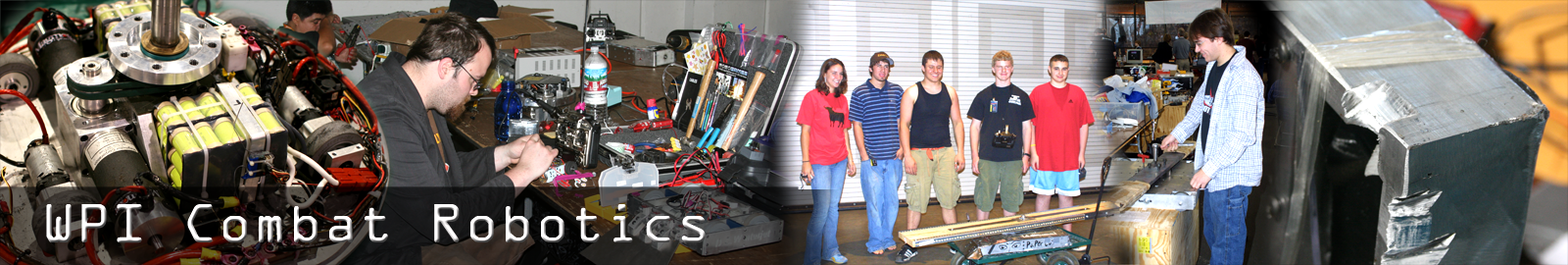
<style>
.page{position:relative;width:1568px;height:265px}
.page>*{position:absolute;margin:0}
.t1{font:49px "OCRAStd";color:#f9f6f6}
</style>
<div class="page">
<p class="t1" style="left:46px;top:204px;width:660px;height:39px">WPI Combat Robotics</p>
</div>
